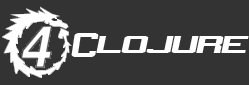
<style>
.page{position:relative;width:249px;height:85px;background:#333333}
.page>*{position:absolute;margin:0}
.t1{font:33.3px "NeverSayDie";color:#fffefe}
</style>
<div class="page">
<p class="t1" style="left:71px;top:33px;width:178px;height:24px">Clojure</p>
</div>
